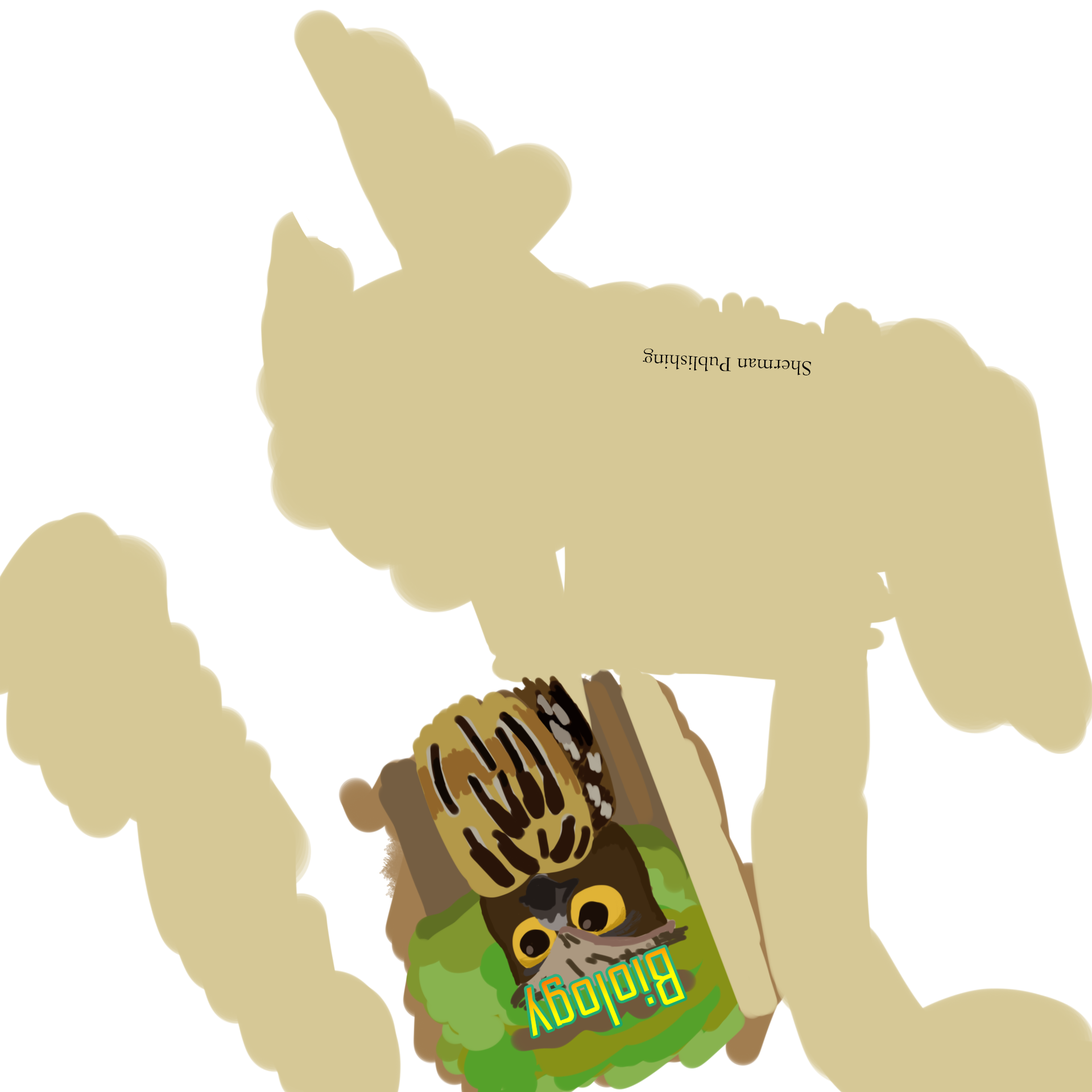
<style>
.page{position:relative;width:1092px;height:1092px;background:#ffffff}
.page>*{position:absolute;margin:0}
.t1{font:21.6px "Garamond";color:#000000}
.t2{font:71.1px "AgencyFB-Reg"}
</style>
<div class="page">
<p class="t1" style="left:643px;top:348px;width:168px;height:27px;rotate:-177deg">Sherman Publishing</p>
<p class="t2" style="left:527px;top:947px;width:158px;height:89px;rotate:158deg">Biology</p>
</div>
